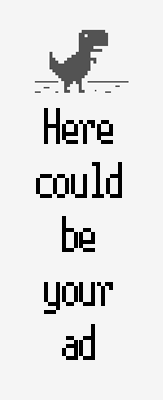
<style>
.page{position:relative;width:163px;height:400px;background:#f5f5f5}
.page>*{position:absolute;margin:0}
.t1{font:45px "Terminal";color:#000000}
</style>
<div class="page">
<p class="t1" style="left:36px;top:108px;width:86px;height:252px;text-align:center">Here<br>could <br>be<br>your<br>ad</p>
</div>
